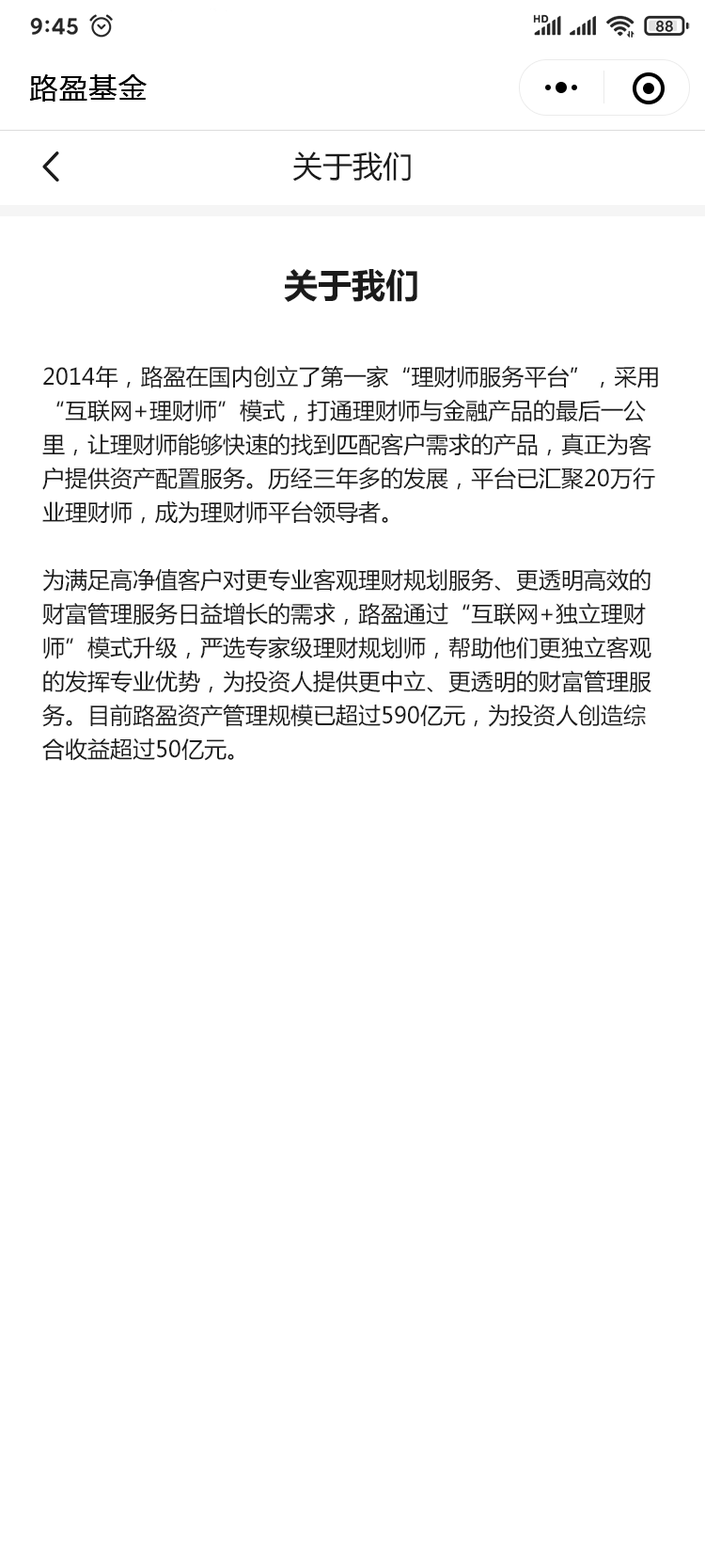
<style>
.page{position:relative;width:705px;height:1568px;background:#ffffff}
.page>*{position:absolute;margin:0}
.t1{font:28.2px "MicrosoftYaHei";letter-spacing:0.05em;color:#000000}
.t2{font:30.1px "MicrosoftYaHei";color:#1b1b1b}
.t3{font:33.9px "MicrosoftYaHei-Bold";color:#1b1b1b}
.t4{font:22.6px/33.9px "MicrosoftYaHei";color:#1b1b1b}
</style>
<div class="page">
<p class="t1" style="left:29px;top:74px;width:118px;height:28px">路盈基金</p>
<p class="t2" style="left:293px;top:151px;width:118px;height:31px">关于我们</p>
<p class="t3" style="left:284px;top:269px;width:134px;height:33px">关于我们</p>
<p class="t4" style="left:42px;top:365px;width:616px;height:396px">2014年，路盈在国内创立了第一家“理财师服务平台”，采用“互联网+理财师”模式，打通理财师与金融产品的最后一公里，让理财师能够快速的找到匹配客户需求的产品，真正为客户提供资产配置服务。历经三年多的发展，平台已汇聚20万行业理财师，成为理财师平台领导者。<br><br>为满足高净值客户对更专业客观理财规划服务、更透明高效的财富管理服务日益增长的需求，路盈通过“互联网+独立理财师”模式升级，严选专家级理财规划师，帮助他们更独立客观的发挥专业优势，为投资人提供更中立、更透明的财富管理服务。目前路盈资产管理规模已超过590亿元，为投资人创造综合收益超过50亿元。</p>
</div>
